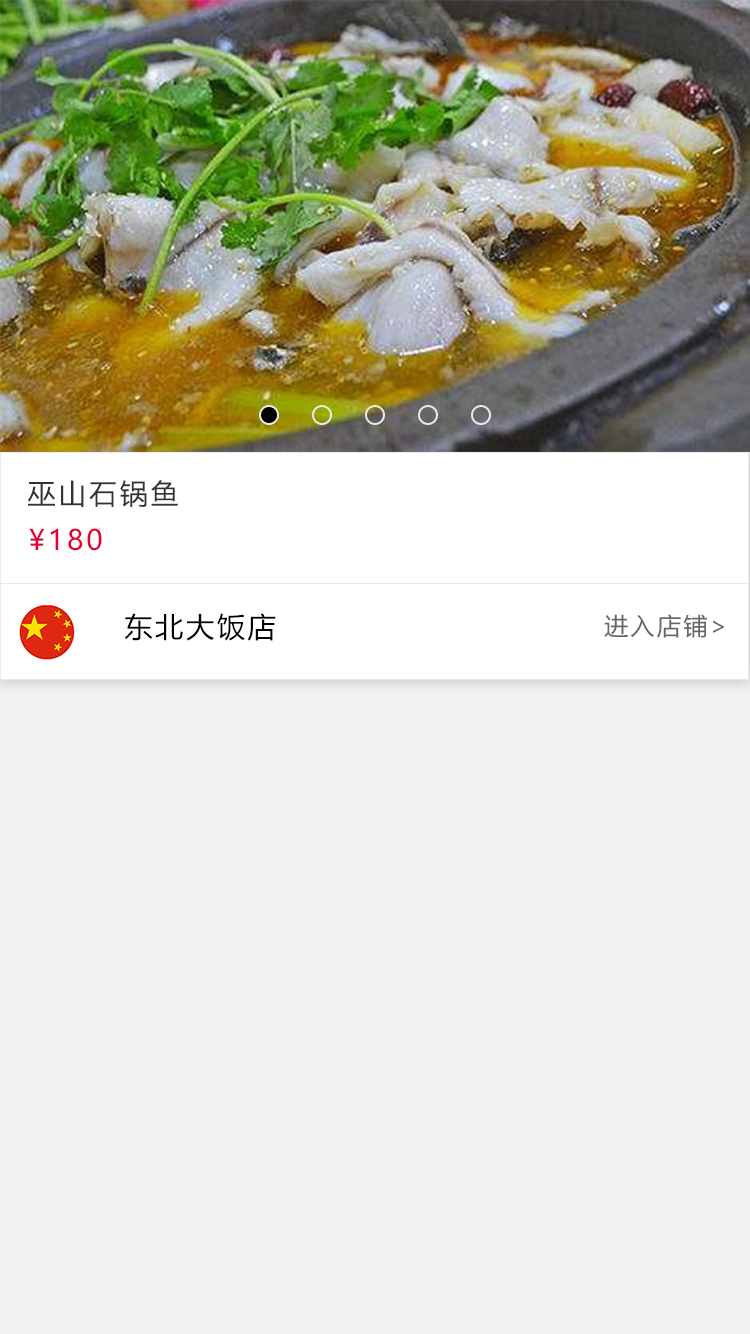
<style>
.page{position:relative;width:750px;height:1334px;background:#f2f2f2}
.page>*{position:absolute;margin:0}
.t1{font:28px "MicrosoftYaHei";letter-spacing:0.1em;color:#333333}
.t2{font:28px "MicrosoftYaHei";letter-spacing:0.1em;color:#e4002f}
.t3{font:28px "MicrosoftYaHei";letter-spacing:0.1em;color:#000000}
.t4{font:24px "MicrosoftYaHei";letter-spacing:0.1em;color:#666666}
</style>
<div class="page">
<p class="t1" style="left:27px;top:480px;width:151px;height:27px">巫山石锅鱼</p>
<p class="t2" style="left:29px;top:528px;width:73px;height:23px">¥180</p>
<p class="t3" style="left:124px;top:613px;width:152px;height:28px">东北大饭店</p>
<p class="t4" style="left:604px;top:614px;width:120px;height:24px">进入店铺&gt;</p>
</div>
